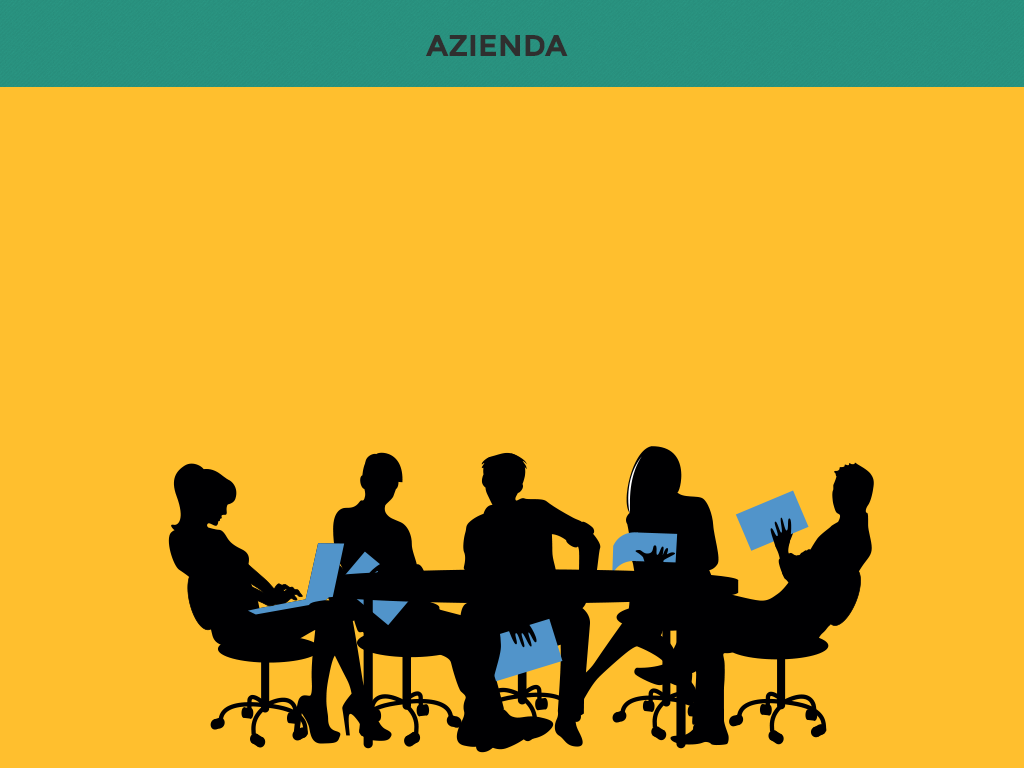
<style>
.page{position:relative;width:1024px;height:768px;background:#ffbf2e}
.page>*{position:absolute;margin:0}
.t1{font:30px "Montserrat-Bold";color:#2f2f2f}
</style>
<div class="page">
<p class="t1" style="left:425px;top:35px;width:143px;height:21px">AZIENDA</p>
</div>
